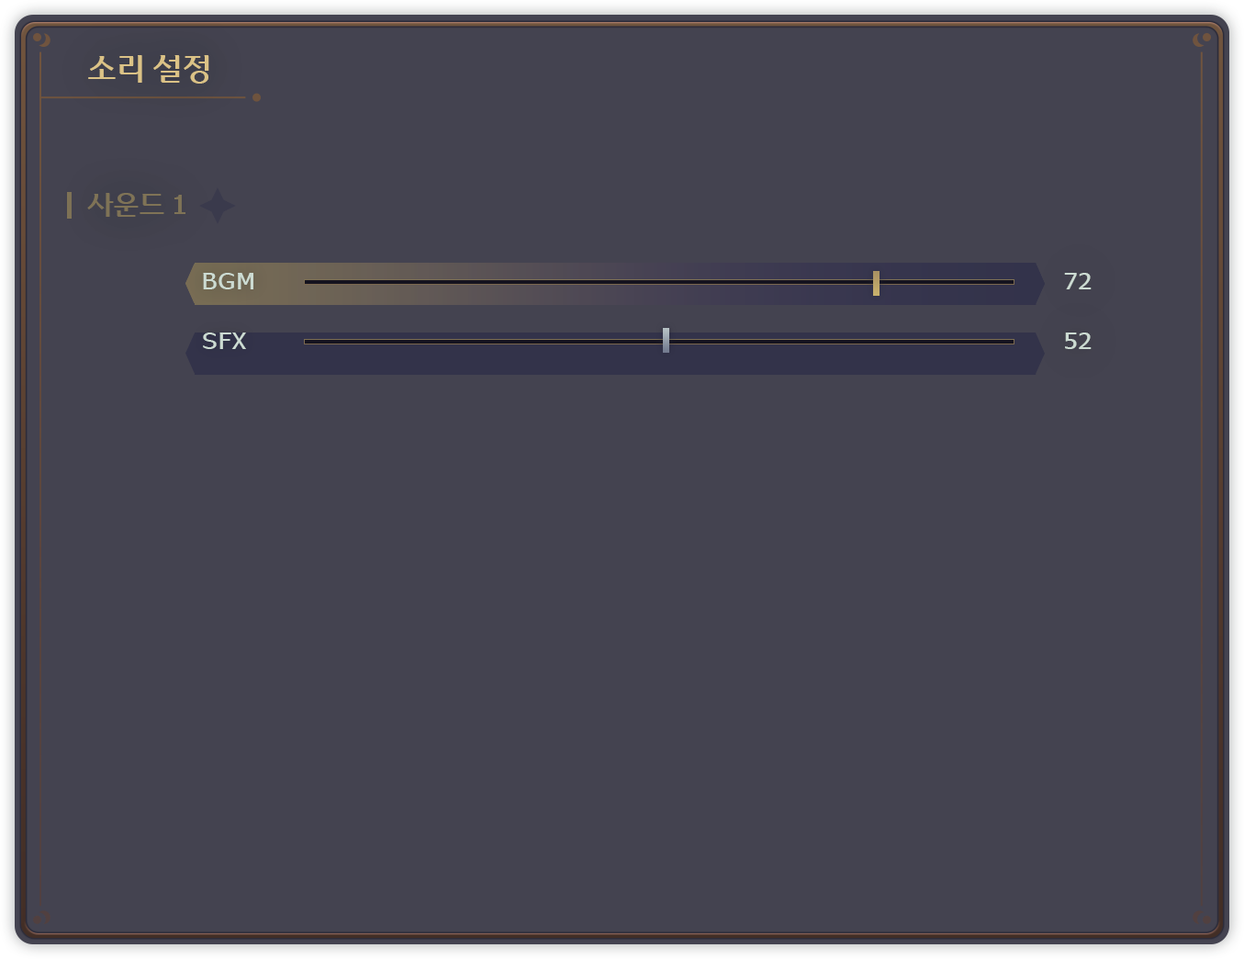
<style>
.page{position:relative;width:1244px;height:959px;background:#444350}
.page>*{position:absolute;margin:0}
.t1{font:30.6px "WooridaumR";color:#dbc286}
.t2{font:26.8px "WooridaumR";color:#7f7356}
.t3{font:23px "WooridaumR";color:#ccdbd2}
</style>
<div class="page">
<p class="t1" style="left:88px;top:55px;width:121px;height:29px">소리 설정</p>
<p class="t2" style="left:87px;top:193px;width:98px;height:24px">사운드 1</p>
<p class="t3" style="left:203px;top:273px;width:50px;height:16px">BGM</p>
<p class="t3" style="left:1064px;top:273px;width:28px;height:16px">72</p>
<p class="t3" style="left:203px;top:332px;width:43px;height:17px">SFX</p>
<p class="t3" style="left:1065px;top:332px;width:27px;height:17px">52</p>
</div>
